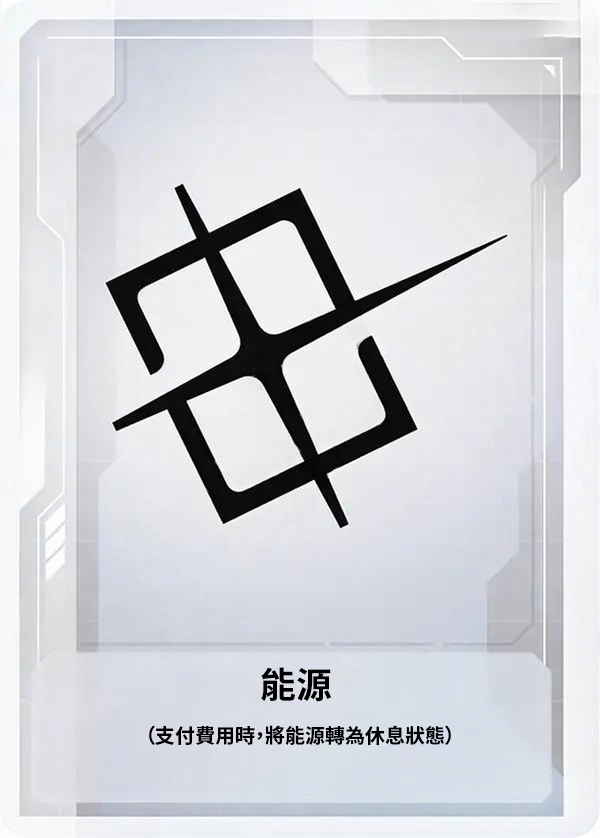
<style>
.page{position:relative;width:600px;height:838px}
.page>*{position:absolute;margin:0}
.t1{font:36px "NotoSansCJKtc-Bold";color:#000000}
.t2{font:20px "NotoSansCJKtc-Bold";color:#000000}
</style>
<div class="page">
<p class="t1" style="left:261px;top:667px;width:71px;height:35px">能源</p>
<p class="t2" style="left:149px;top:725px;width:302px;height:21px">（支付費用時，將能源轉為休息狀態）</p>
</div>
